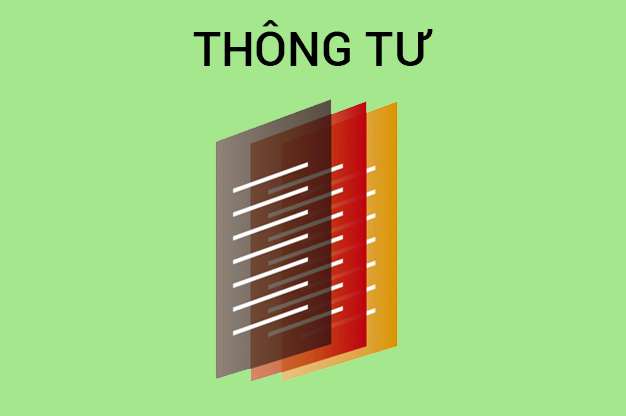
<style>
.page{position:relative;width:626px;height:416px;background:#a5e78c}
.page>*{position:absolute;margin:0}
.t1{font:48px "Roboto-Medium";color:#000000}
</style>
<div class="page">
<p class="t1" style="left:193px;top:20px;width:240px;height:46px">THÔNG TƯ</p>
</div>
